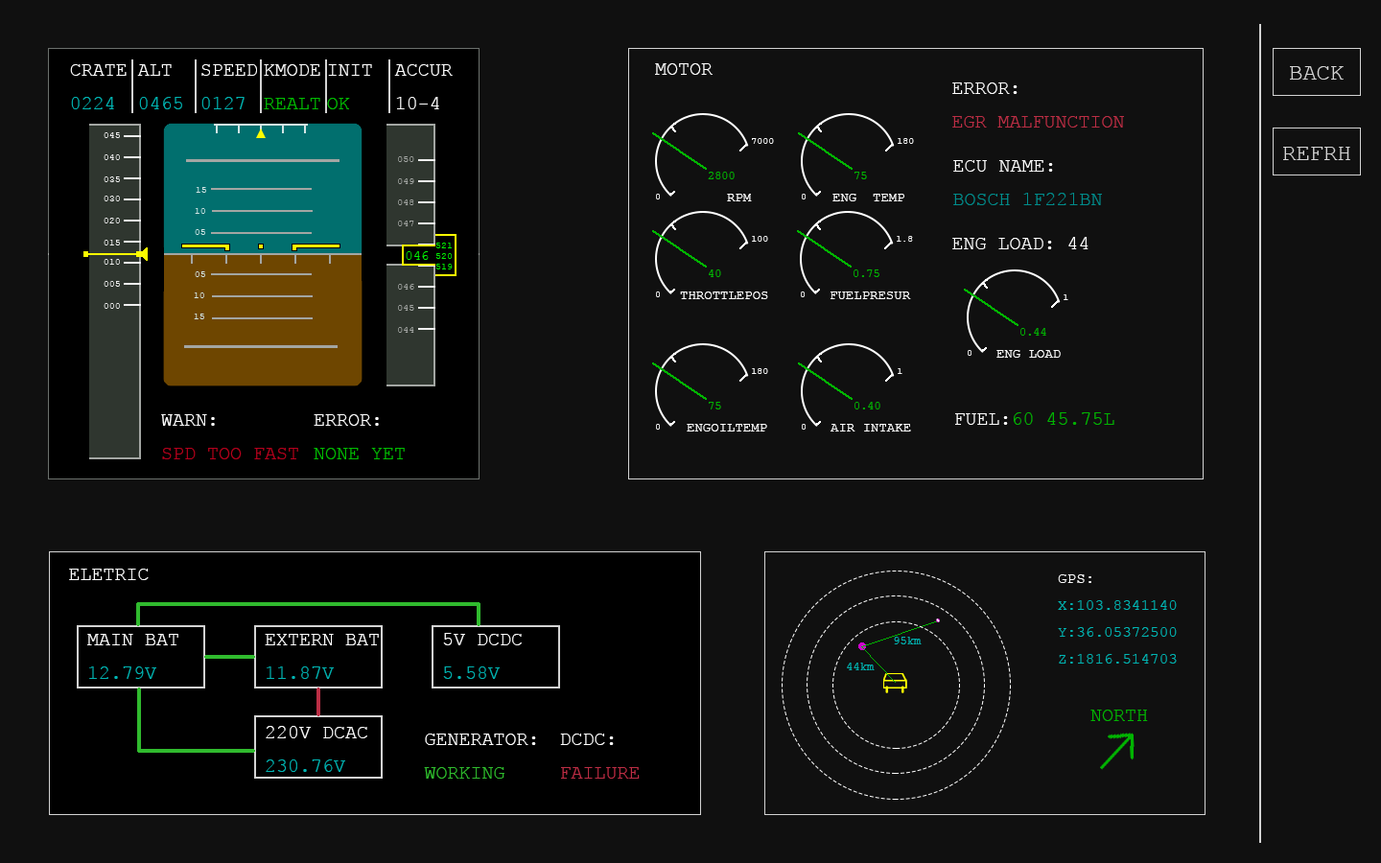
<style>
.page{position:relative;width:1381px;height:863px;background:#101010}
.page>*{position:absolute;margin:0}
.t1{font:19.2px "CourierNewPSMT";color:#ffffff}
.t2{font:19.2px "CourierNewPSMT";color:#00b5b3}
.t3{font:19.2px "CourierNewPSMT";color:#01bc01}
.t4{font:23px "CourierNewPSMT";color:#d3d3d3}
.t5{font:19.2px "CourierNewPSMT";color:#bb2e45}
.t6{font:9.6px "CourierNewPSMT";color:#ffffff}
.t7{font:19.2px "CourierNewPSMT";color:#008d8c}
.t8{font:11.5px "CourierNewPSMT";color:#01b401}
.t9{font:13.4px "CourierNewPSMT";color:#ffffff}
.t10{font:19.2px "CourierNewPSMT";color:#01b401}
.t11{font:19.2px "CourierNewPSMT";color:#b5001e}
.t12{font:15.3px "CourierNewPSMT";color:#00b5b3}
.t13{font:15.3px "CourierNewPSMT";color:#ffffff}
.t14{font:11.5px "CourierNewPSMT";color:#00b5b3}
.t15{font:19.2px "CourierNewPSMT";color:#30bb2e}
</style>
<div class="page">
<p class="t1" style="left:70px;top:64px;width:57px;height:45px">CRATE<br><span class="t2">0224</span></p>
<p class="t2" style="left:137px;top:64px;width:45px;height:45px"><span class="t1">ALT<br></span>0465</p>
<p class="t1" style="left:201px;top:64px;width:56px;height:45px">SPEED<br><span class="t2">0127</span></p>
<p class="t1" style="left:264px;top:64px;width:56px;height:45px">KMODE<br><span class="t3">REALT</span></p>
<p class="t1" style="left:327px;top:64px;width:45px;height:45px">INIT<br><span class="t3">OK</span></p>
<p class="t1" style="left:394px;top:64px;width:59px;height:45px">ACCUR<br>10-4</p>
<p class="t1" style="left:655px;top:63px;width:58px;height:12px">MOTOR</p>
<p class="t4" style="left:1290px;top:66px;width:54px;height:14px">BACK</p>
<p class="t5" style="left:952px;top:82px;width:172px;height:46px"><span class="t1">ERROR:<br></span>EGR MALFUNCTION</p>
<p class="t6" style="left:752px;top:138px;width:22px;height:6px">7000</p>
<p class="t6" style="left:898px;top:138px;width:16px;height:6px">180</p>
<p class="t4" style="left:1283px;top:147px;width:68px;height:13px">REFRH</p>
<p class="t7" style="left:953px;top:160px;width:149px;height:45px"><span class="t1">ECU NAME:<br></span>BOSCH 1F221BN</p>
<p class="t8" style="left:708px;top:172px;width:27px;height:7px">2800</p>
<p class="t8" style="left:855px;top:172px;width:12px;height:7px">75</p>
<p class="t6" style="left:656px;top:194px;width:4px;height:6px">0</p>
<p class="t9" style="left:727px;top:194px;width:25px;height:7px">RPM</p>
<p class="t6" style="left:802px;top:194px;width:4px;height:6px">0</p>
<p class="t9" style="left:833px;top:194px;width:72px;height:7px">ENG  TEMP</p>
<p class="t6" style="left:752px;top:236px;width:16px;height:6px">100</p>
<p class="t6" style="left:897px;top:236px;width:16px;height:6px">1.8</p>
<p class="t1" style="left:952px;top:237px;width:137px;height:12px">ENG LOAD: 44</p>
<p class="t8" style="left:709px;top:270px;width:12px;height:7px">40</p>
<p class="t8" style="left:854px;top:270px;width:26px;height:7px">0.75</p>
<p class="t6" style="left:656px;top:292px;width:4px;height:5px">0</p>
<p class="t9" style="left:680px;top:292px;width:88px;height:7px">THROTTLEPOS</p>
<p class="t6" style="left:801px;top:292px;width:4px;height:5px">0</p>
<p class="t9" style="left:831px;top:292px;width:80px;height:7px">FUELPRESUR</p>
<p class="t6" style="left:1064px;top:294px;width:5px;height:6px">1</p>
<p class="t8" style="left:1021px;top:328px;width:25px;height:8px">0.44</p>
<p class="t6" style="left:968px;top:350px;width:4px;height:6px">0</p>
<p class="t9" style="left:997px;top:350px;width:64px;height:8px">ENG LOAD</p>
<p class="t6" style="left:752px;top:368px;width:16px;height:6px">180</p>
<p class="t6" style="left:898px;top:368px;width:5px;height:6px">1</p>
<p class="t8" style="left:709px;top:402px;width:12px;height:8px">75</p>
<p class="t8" style="left:855px;top:402px;width:26px;height:8px">0.40</p>
<p class="t10" style="left:955px;top:412px;width:160px;height:13px"><span class="t1">FUEL:</span>60 45.75L</p>
<p class="t11" style="left:161px;top:414px;width:137px;height:45px"><span class="t1">WARN:<br></span>SPD TOO FAST</p>
<p class="t3" style="left:314px;top:414px;width:91px;height:45px"><span class="t1">ERROR:<br></span>NONE YET</p>
<p class="t6" style="left:656px;top:424px;width:4px;height:6px">0</p>
<p class="t9" style="left:687px;top:424px;width:80px;height:8px">ENGOILTEMP</p>
<p class="t6" style="left:802px;top:424px;width:4px;height:6px">0</p>
<p class="t9" style="left:831px;top:424px;width:80px;height:8px">AIR INTAKE</p>
<p class="t1" style="left:69px;top:569px;width:80px;height:11px">ELETRIC</p>
<p class="t12" style="left:1058px;top:575px;width:119px;height:89px"><span class="t13">GPS:<br></span>X:103.8341140<br>Y:36.05372500<br>Z:1816.514703</p>
<p class="t1" style="left:87px;top:634px;width:91px;height:45px">MAIN BAT<br><span class="t2">12.79V</span></p>
<p class="t1" style="left:265px;top:634px;width:114px;height:45px">EXTERN BAT<br><span class="t2">11.87V</span></p>
<p class="t1" style="left:443px;top:633px;width:79px;height:46px">5V DCDC<br><span class="t2">5.58V</span></p>
<p class="t14" style="left:894px;top:637px;width:28px;height:8px">95km</p>
<p class="t14" style="left:847px;top:663px;width:28px;height:7px">44km</p>
<p class="t10" style="left:1091px;top:710px;width:57px;height:11px">NORTH</p>
<p class="t1" style="left:266px;top:726px;width:101px;height:46px">220V DCAC<br><span class="t2">230.76V</span></p>
<p class="t1" style="left:424px;top:734px;width:112px;height:45px">GENERATOR:<br><span class="t15">WORKING</span></p>
<p class="t5" style="left:560px;top:734px;width:80px;height:45px"><span class="t1">DCDC:<br></span>FAILURE</p>
</div>
